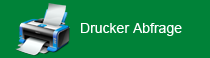
<style>
.page{position:relative;width:210px;height:58px;background:#008238}
.page>*{position:absolute;margin:0}
.t1{font:14px "ArialMT";color:#ffffff}
</style>
<div class="page">
<p class="t1" style="left:81px;top:23px;width:101px;height:13px">Drucker Abfrage</p>
</div>
